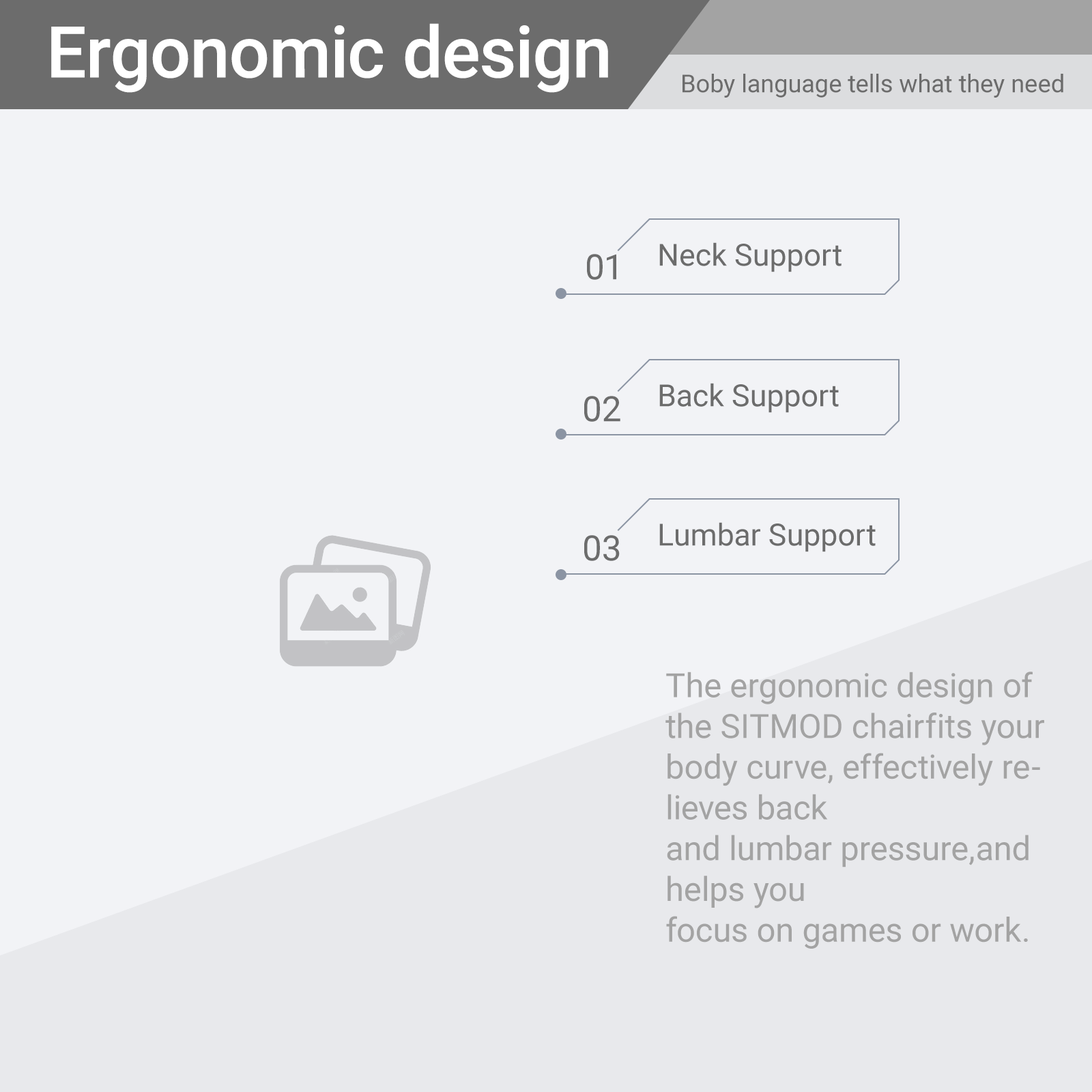
<style>
.page{position:relative;width:1092px;height:1092px;background:#f2f3f6}
.page>*{position:absolute;margin:0}
.t1{font:71.3px "Roboto-Medium";color:#ffffff}
.t2{font:24.8px "Roboto-Regular";color:#6c6c6c}
.t3{font:30.6px "Roboto-Regular";color:#6c6c6c}
.t4{font:34.9px "Roboto-Regular";color:#6c6c6c}
.t5{font:33.5px/40.8px "Roboto-Regular";color:#a3a3a3}
</style>
<div class="page">
<p class="t1" style="left:51px;top:23px;width:557px;height:70px">Ergonomic design</p>
<p class="t2" style="left:682px;top:74px;width:381px;height:24px">Boby language tells what they need</p>
<p class="t3" style="left:659px;top:242px;width:183px;height:30px">Neck Support</p>
<p class="t4" style="left:587px;top:254px;width:29px;height:26px">01</p>
<p class="t3" style="left:659px;top:383px;width:180px;height:30px">Back Support</p>
<p class="t4" style="left:584px;top:396px;width:36px;height:26px">02</p>
<p class="t3" style="left:659px;top:522px;width:217px;height:30px">Lumbar Support</p>
<p class="t4" style="left:584px;top:535px;width:36px;height:26px">03</p>
<p class="t5" style="left:665px;top:672px;width:379px;height:277px">The ergonomic design of the SITMOD chairfits your body curve, effectively relieves back<br>and lumbar pressure,and helps you<br>focus on games or work.</p>
</div>
